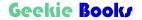
<style>
.page{position:relative;width:142px;height:20px;background:#ffffff}
.page>*{position:absolute;margin:0}
.t1{font:21.4px "Bauhaus93";color:#66cc99}
.t2{font:21.4px "Bauhaus93";color:#0000cd}
</style>
<div class="page">
<p class="t1" style="left:8px;top:2px;width:125px;height:16px">Geekie <span class="t2">Books</span></p>
</div>
